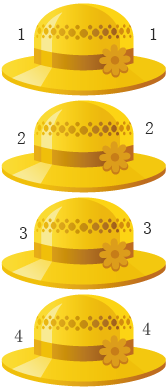
<style>
.page{position:relative;width:168px;height:388px;background:#ffffff}
.page>*{position:absolute;margin:0}
.t1{font:18px "SimSun";color:#282828}
.t2{font:18px "SimSun"}
</style>
<div class="page">
<p class="t1" style="left:18px;top:28px;width:7px;height:12px">1</p>
<p class="t1" style="left:150px;top:28px;width:7px;height:12px">1</p>
<p class="t1" style="left:145px;top:122px;width:8px;height:12px">2</p>
<p class="t1" style="left:17px;top:132px;width:8px;height:12px">2</p>
<p class="t1" style="left:144px;top:222px;width:7px;height:12px">3</p>
<p class="t1" style="left:20px;top:227px;width:7px;height:12px">3</p>
<p class="t2" style="left:14px;top:329px;width:9px;height:13px">4</p>
<p class="t2" style="left:142px;top:322px;width:9px;height:13px">4</p>
</div>
